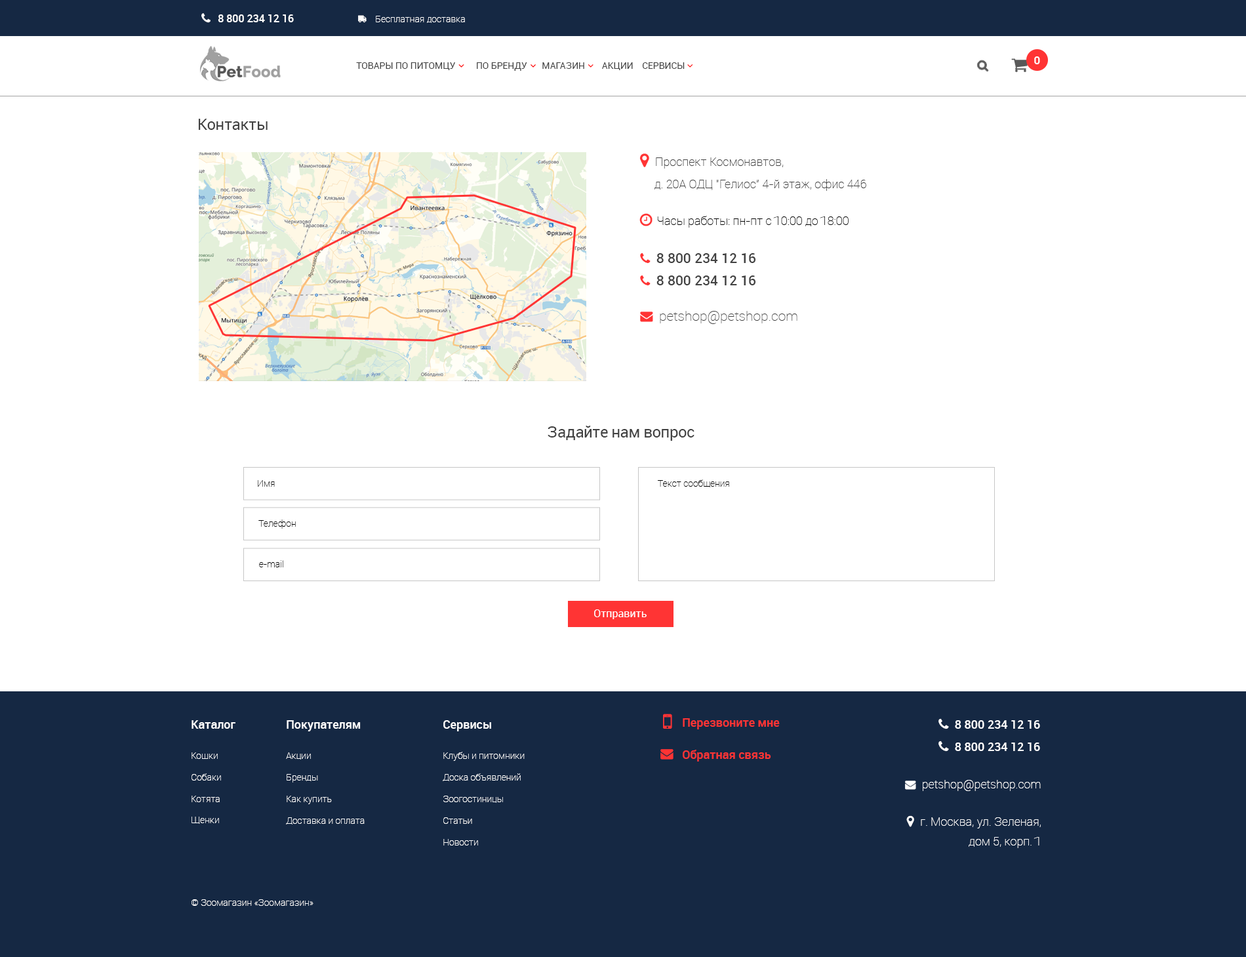
<style>
.page{position:relative;width:1246px;height:957px;background:#ffffff}
.page>*{position:absolute;margin:0}
.t1{font:10.5px "Roboto-Medium";color:#ffffff}
.t2{font:9.2px "Roboto-Thin";color:#ffffff}
.t3{font:11.1px "Roboto-Light";color:#ffffff}
.t4{font:15.7px "Roboto-Regular";letter-spacing:-0.02em;color:#424242}
.t5{font:9.2px "Roboto-Thin";color:#000000}
.t6{font:10.5px "Roboto-Regular";color:#ffffff}
.t7{font:9.2px/21.6px "Roboto-Thin";color:#ffffff}
.t8{font:11.8px/17px "Roboto-Medium";color:#ffffff}
.t9{font:9.2px/30.1px "Roboto-Thin";color:#ffffff}
.t10{font:9.2px/30.2px "Roboto-Thin";color:#ffffff}
.t11{font:11.8px "Roboto-Medium";color:#ff3434}
</style>
<div class="page">
<p class="t1" style="left:218px;top:14px;width:76px;height:8px">8 800 234 12 16</p>
<p class="t2" style="left:376px;top:16px;width:89px;height:7px">Бесплатная доставка</p>
<p class="t3" style="left:1034px;top:56px;width:6px;height:8px">0</p>
<p class="t4" style="left:199px;top:119px;width:69px;height:11px">Контакты</p>
<p class="t4" style="left:548px;top:426px;width:147px;height:15px">Задайте нам вопрос</p>
<p class="t5" style="left:258px;top:480px;width:17px;height:7px">Имя</p>
<p class="t5" style="left:658px;top:479px;width:71px;height:8px">Текст сообщения</p>
<p class="t5" style="left:258px;top:519px;width:38px;height:10px">Телефон</p>
<p class="t5" style="left:259px;top:560px;width:24px;height:7px">e-mail</p>
<p class="t6" style="left:594px;top:609px;width:53px;height:10px">Отправить</p>
<p class="t7" style="left:192px;top:720px;width:43px;height:104px"><span class="t8">Каталог<br></span><span class="t9">Кошки<br></span>Собаки<br>Котята<br>Щенки</p>
<p class="t7" style="left:286px;top:720px;width:79px;height:104px"><span class="t8">Покупателям<br></span><span class="t10">Акции<br></span>Бренды<br>Как купить<br>Доставка и оплата</p>
<p class="t7" style="left:443px;top:720px;width:82px;height:125px"><span class="t8">Сервисы<br></span><span class="t9">Клубы и питомники<br></span>Доска объявлений<br>Зоогостиницы<br>Статьи<br>Новости</p>
<p class="t11" style="left:683px;top:718px;width:97px;height:11px">Перезвоните мне</p>
<p class="t11" style="left:683px;top:750px;width:88px;height:11px">Обратная связь</p>
<p class="t2" style="left:192px;top:899px;width:122px;height:7px">© Зоомагазин «Зоомагазин»</p>
</div>
